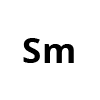
<style>
.page{position:relative;width:100px;height:100px;background:#ffffff}
.page>*{position:absolute;margin:0}
.t1{font:35px "OpenSans-Bold";color:#000000}
</style>
<div class="page">
<p class="t1" style="left:23px;top:38px;width:51px;height:25px">Sm</p>
</div>
